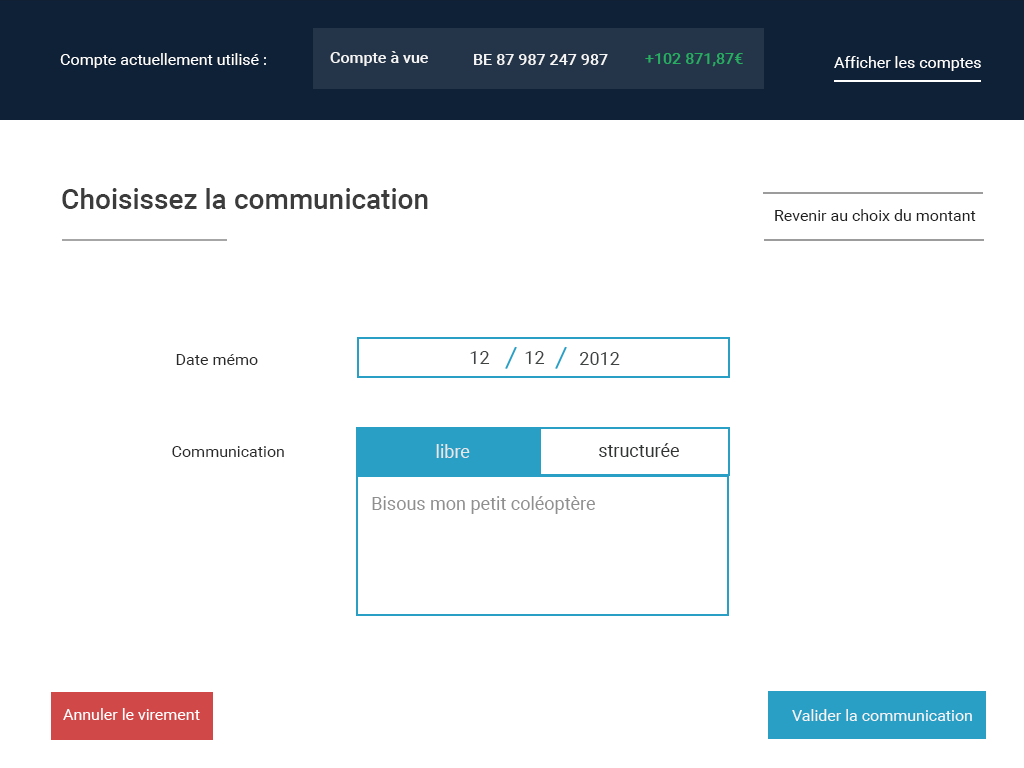
<style>
.page{position:relative;width:1024px;height:768px;background:#ffffff}
.page>*{position:absolute;margin:0}
.t1{font:16px "Roboto-Regular";color:#ffffff}
.t2{font:16px "Roboto-Medium";color:#f5f5f5}
.t3{font:16px "Roboto-Medium";color:#27ae60}
.t4{font:28px "Roboto-Medium";color:#3c3c3c}
.t5{font:16px "Roboto-Regular";color:#202020}
.t6{font:18px "Roboto-Regular";color:#404343}
.t7{font:16px "Roboto-Regular";color:#2a2a2a}
.t8{font:18px "Roboto-Regular";color:#e8e8e8}
.t9{font:18px "Roboto-Regular";color:#333434}
.t10{font:18px "Roboto-Regular";color:#8f8f8f}
.t11{font:16px "Roboto-Regular";color:#f5f5f5}
</style>
<div class="page">
<p class="t1" style="left:60px;top:53px;width:206px;height:15px">Compte actuellement utilisé :</p>
<p class="t2" style="left:330px;top:51px;width:98px;height:15px">Compte à vue</p>
<p class="t2" style="left:474px;top:54px;width:134px;height:11px">BE 87 987 247 987</p>
<p class="t3" style="left:645px;top:53px;width:98px;height:14px">+102 871,87€</p>
<p class="t1" style="left:834px;top:56px;width:147px;height:15px">Afficher les comptes</p>
<p class="t4" style="left:62px;top:188px;width:366px;height:21px">Choisissez la communication</p>
<p class="t5" style="left:775px;top:209px;width:201px;height:12px">Revenir au choix du montant</p>
<p class="t6" style="left:470px;top:351px;width:20px;height:13px">12</p>
<p class="t6" style="left:525px;top:351px;width:20px;height:13px">12</p>
<p class="t6" style="left:580px;top:352px;width:40px;height:13px">2012</p>
<p class="t7" style="left:176px;top:354px;width:82px;height:11px">Date mémo</p>
<p class="t7" style="left:172px;top:446px;width:112px;height:11px">Communication</p>
<p class="t8" style="left:436px;top:444px;width:34px;height:14px">libre</p>
<p class="t9" style="left:599px;top:443px;width:80px;height:14px">structurée</p>
<p class="t10" style="left:372px;top:496px;width:223px;height:18px">Bisous mon petit coléoptère</p>
<p class="t1" style="left:63px;top:708px;width:137px;height:12px">Annuler le virement</p>
<p class="t11" style="left:792px;top:709px;width:180px;height:12px">Valider la communication</p>
</div>
